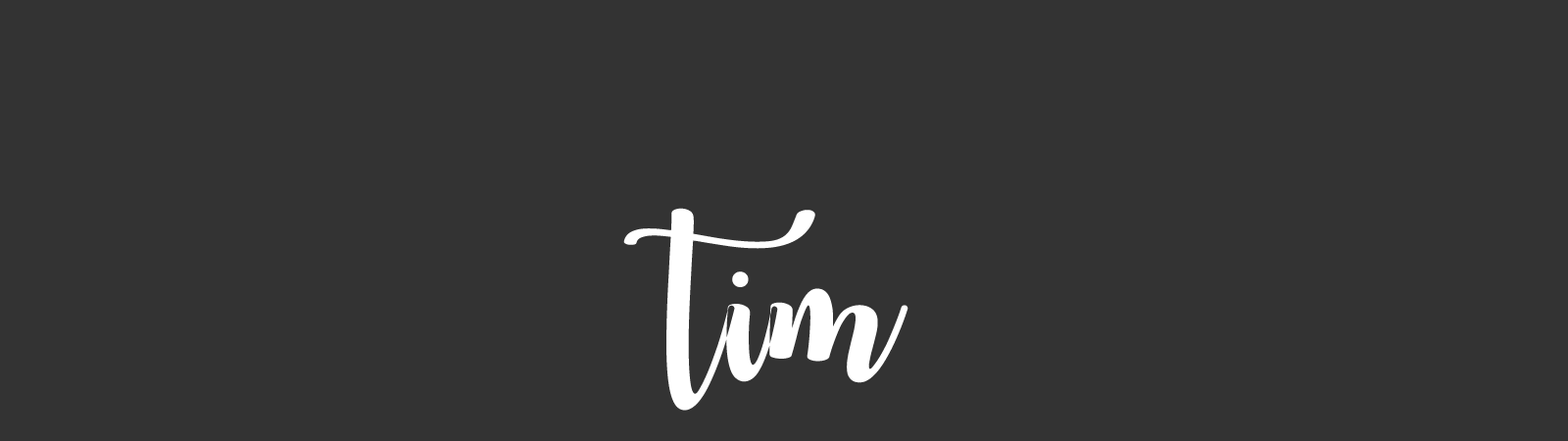
<style>
.page{position:relative;width:1568px;height:441px;background:#333333}
.page>*{position:absolute;margin:0}
.t1{font:156.8px "AutumninNovember";color:#ffffff}
</style>
<div class="page">
<p class="t1" style="left:623px;top:208px;width:285px;height:203px">tim</p>
</div>
